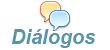
<style>
.page{position:relative;width:110px;height:50px;background:#ffffff}
.page>*{position:absolute;margin:0}
.t1{font:20px "Arial-BoldItalicMT";color:#5894ae}
</style>
<div class="page">
<p class="t1" style="left:12px;top:29px;width:84px;height:19px">Diálogos</p>
</div>
